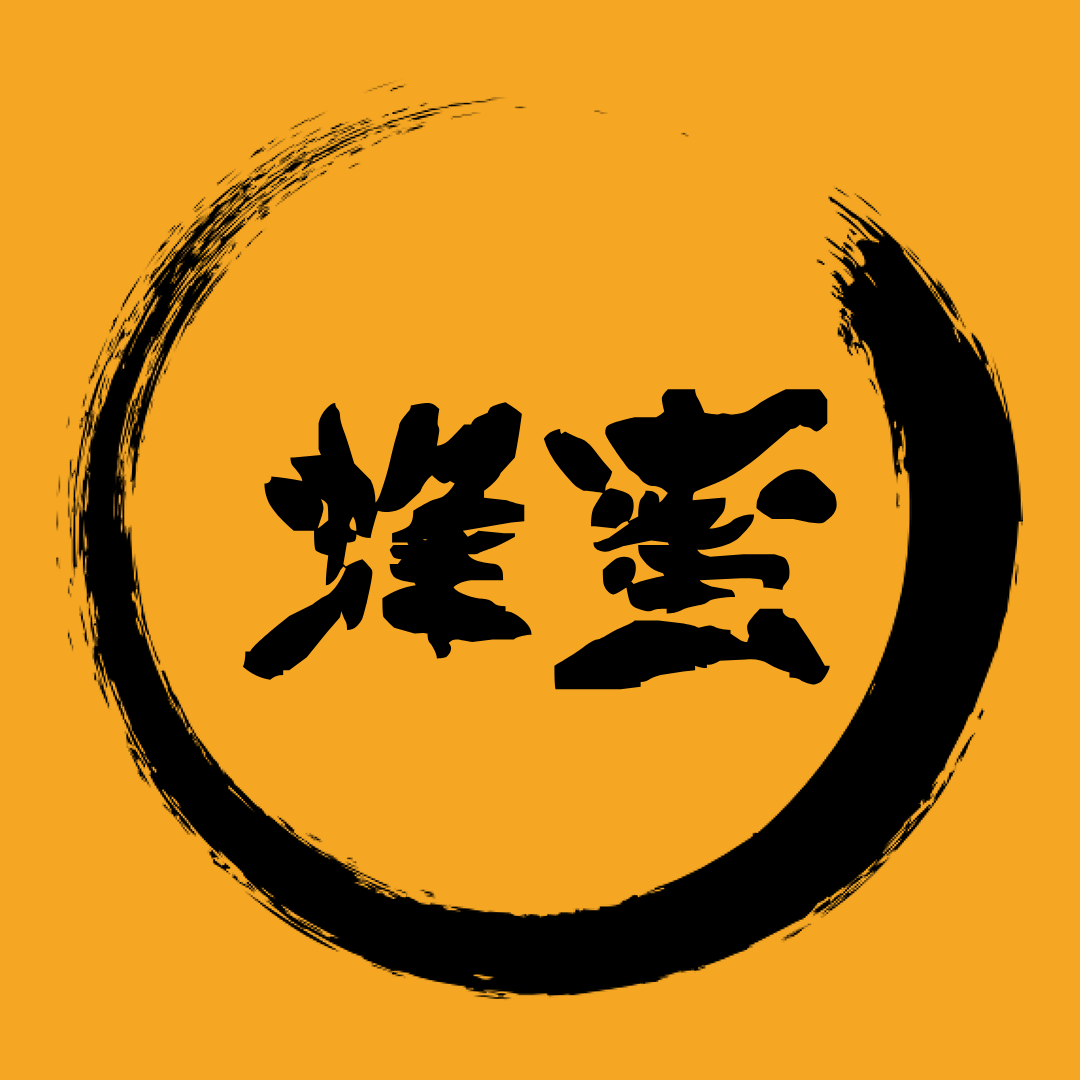
<style>
.page{position:relative;width:1080px;height:1080px;background:#f5a623}
.page>*{position:absolute;margin:0}
.t1{font:302.5px "ZinHenaBokuryu-RCF";color:#000000}
</style>
<div class="page">
<p class="t1" style="left:242px;top:389px;width:595px;height:301px">蜂蜜</p>
</div>
